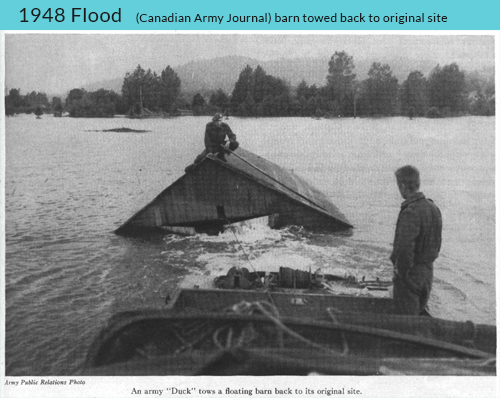
<style>
.page{position:relative;width:500px;height:398px}
.page>*{position:absolute;margin:0}
.t1{font:20px "Lato-Regular";letter-spacing:0.025em;color:#1a1a1a}
.t2{font:12px "Lato-Regular";letter-spacing:0.025em;color:#1a1a1a}
</style>
<div class="page">
<p class="t1" style="left:19px;top:8px;width:102px;height:14px">1948 Flood</p>
<p class="t2" style="left:136px;top:12px;width:312px;height:12px">(Canadian Army Journal) barn towed back to original site</p>
</div>
